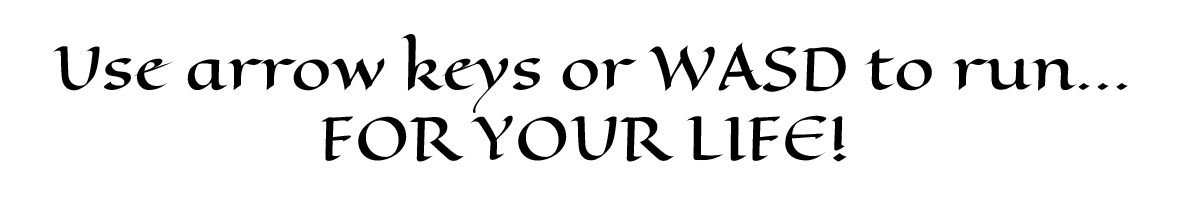
<style>
.page{position:relative;width:1179px;height:212px;background:#ffffff}
.page>*{position:absolute;margin:0}
.t1{font:58.3px "EagleLake-Regular";color:#000000}
</style>
<div class="page">
<p class="t1" style="left:53px;top:34px;width:1075px;height:128px;text-align:center">Use arrow keys or WASD to run...<br>FOR YOUR LIFE!</p>
</div>
